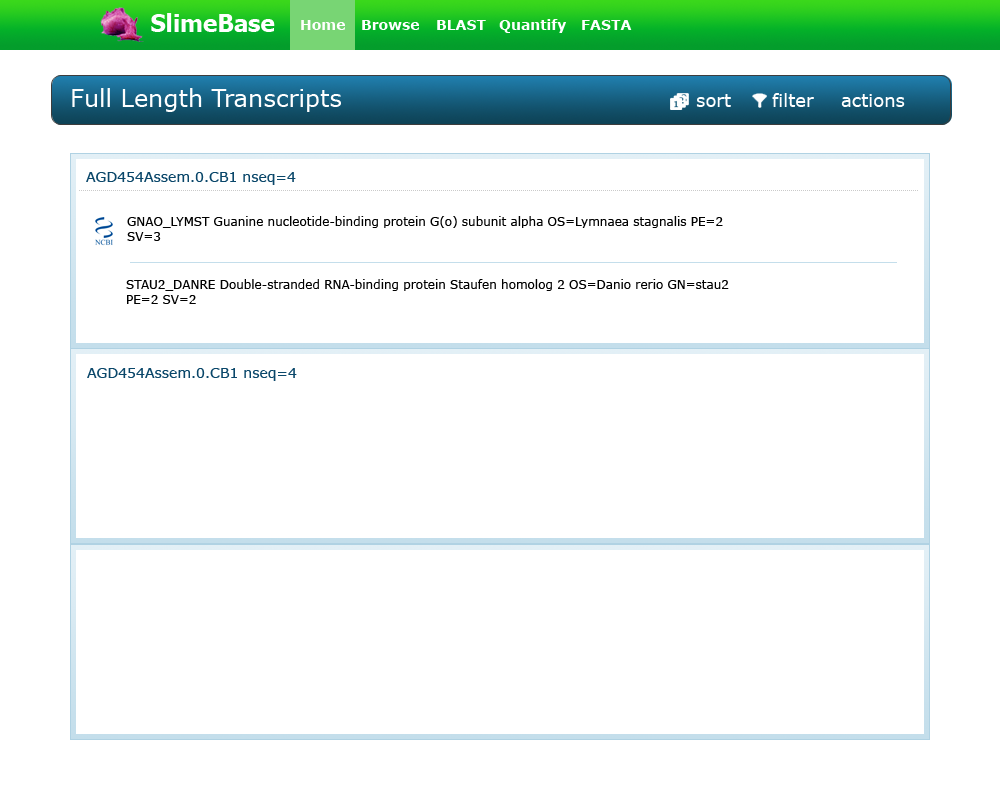
<style>
.page{position:relative;width:1000px;height:800px;background:#ffffff}
.page>*{position:absolute;margin:0}
.t1{font:24px "Tahoma-Bold";color:#ffffff}
.t2{font:14px "Verdana-Bold";color:#ffffff}
.t3{font:24px "Verdana";color:#ffffff}
.t4{font:18px "Verdana";color:#ffffff}
.t5{font:14px "Verdana";color:#0a476a}
.t6{font:12px "Verdana";color:#000000}
</style>
<div class="page">
<p class="t1" style="left:151px;top:13px;width:124px;height:19px">SlimeBase</p>
<p class="t2" style="left:301px;top:20px;width:44px;height:10px">Home</p>
<p class="t2" style="left:362px;top:20px;width:57px;height:10px">Browse</p>
<p class="t2" style="left:437px;top:20px;width:49px;height:10px">BLAST</p>
<p class="t2" style="left:499px;top:19px;width:67px;height:14px">Quantify</p>
<p class="t2" style="left:582px;top:20px;width:50px;height:10px">FASTA</p>
<p class="t3" style="left:72px;top:88px;width:269px;height:24px">Full Length Transcripts</p>
<p class="t4" style="left:696px;top:94px;width:35px;height:13px">sort</p>
<p class="t4" style="left:772px;top:93px;width:42px;height:14px">filter</p>
<p class="t4" style="left:841px;top:94px;width:64px;height:13px">actions</p>
<p class="t5" style="left:86px;top:172px;width:210px;height:13px">AGD454Assem.0.CB1 nseq=4</p>
<p class="t6" style="left:127px;top:216px;width:596px;height:25px">GNAO_LYMST Guanine nucleotide-binding protein G(o) subunit alpha OS=Lymnaea stagnalis PE=2 SV=3</p>
<p class="t6" style="left:126px;top:279px;width:603px;height:25px">STAU2_DANRE Double-stranded RNA-binding protein Staufen homolog 2 OS=Danio rerio GN=stau2 PE=2 SV=2</p>
<p class="t5" style="left:87px;top:368px;width:210px;height:13px">AGD454Assem.0.CB1 nseq=4</p>
</div>
